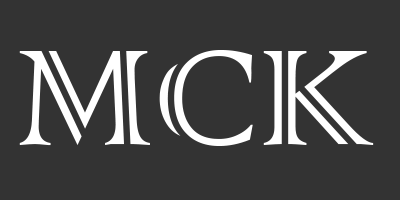
<style>
.page{position:relative;width:400px;height:200px;background:#333333}
.page>*{position:absolute;margin:0}
.t1{font:179.7px "ColonnaMT";color:#ffffff}
</style>
<div class="page">
<p class="t1" style="left:19px;top:50px;width:355px;height:96px">MCK</p>
</div>
